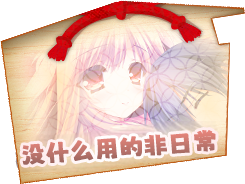
<style>
.page{position:relative;width:245px;height:184px;background:#ffffff}
.page>*{position:absolute;margin:0}
.t1{font:24px "MaokenAssortedSans";font-weight:bold}
</style>
<div class="page">
<p class="t1" style="left:22px;top:130px;width:194px;height:35px;rotate:-4deg">没什么用的非日常</p>
</div>
